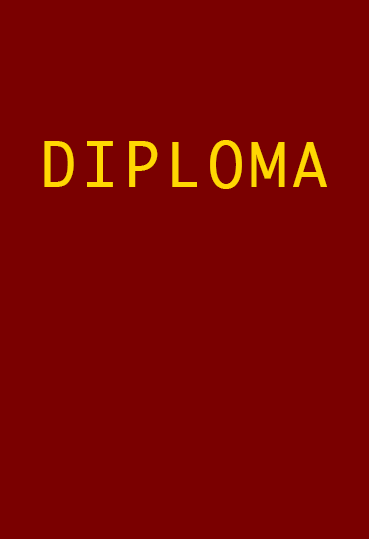
<style>
.page{position:relative;width:369px;height:539px;background:#7a0000}
.page>*{position:absolute;margin:0}
.t1{font:60px "Ayuthaya";letter-spacing:0.1em;color:#ffd702}
</style>
<div class="page">
<p class="t1" style="left:44px;top:140px;width:283px;height:49px">DIPLOMA</p>
</div>
